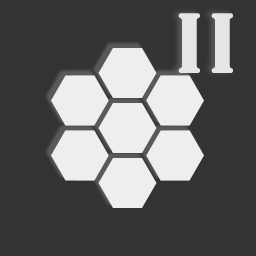
<style>
.page{position:relative;width:256px;height:256px;background:#333333}
.page>*{position:absolute;margin:0}
.t1{font:80px "StencilStd";letter-spacing:0.1em;color:#e5e5e5;scale:0.75 1}
</style>
<div class="page">
<p class="t1" style="left:178px;top:13px;width:55px;height:60px">II</p>
</div>
